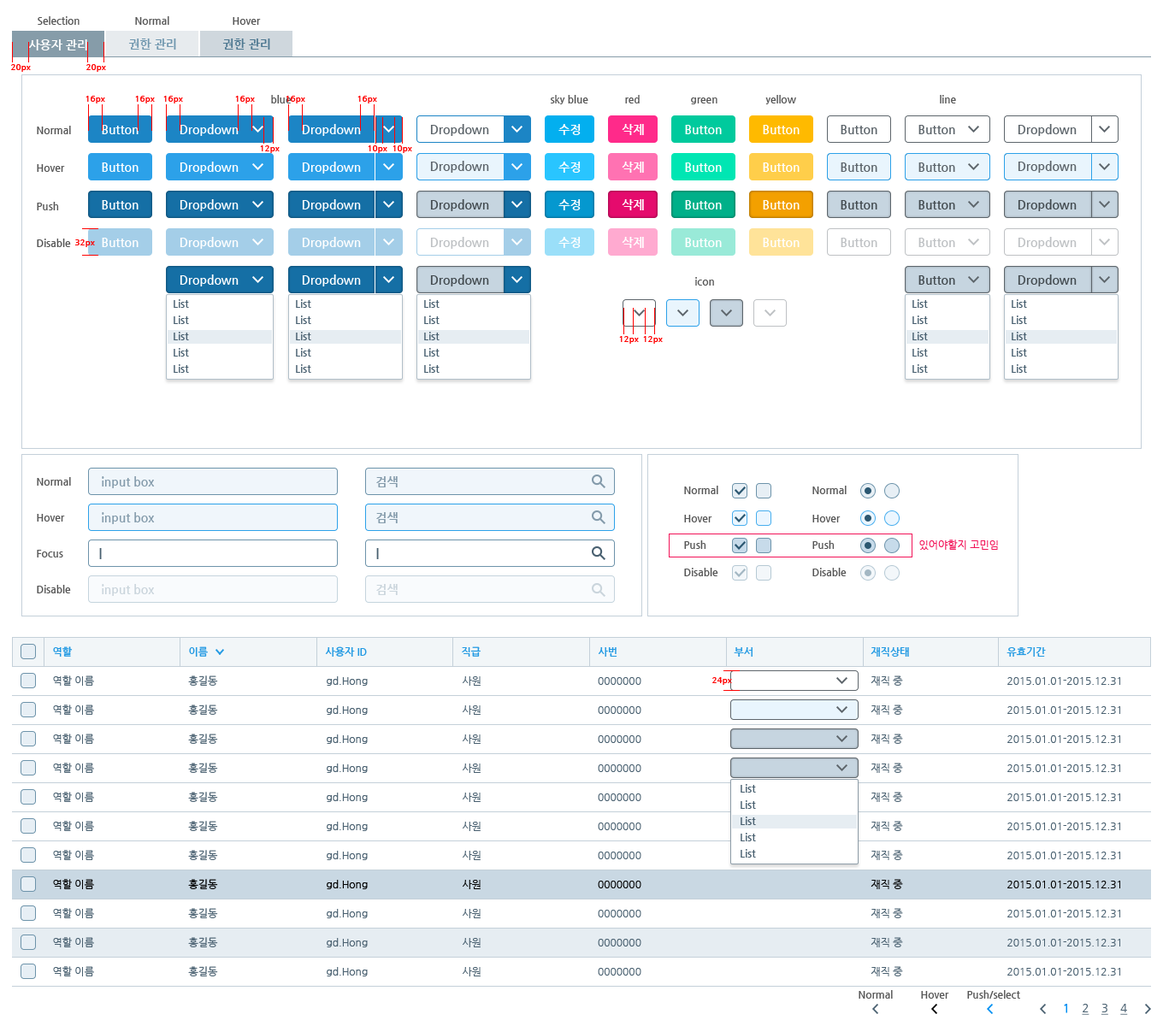
<style>
.page{position:relative;width:1163px;height:1026px;background:#ffffff}
.page>*{position:absolute;margin:0}
.t1{font:10.3px "NanumGothicBold";color:#565656}
.t2{font:12px "NanumGothicBold";color:#ffffff}
.t3{font:12px "NanumGothicBold";color:#7097af}
.t4{font:12px "NanumGothicBold";color:#4e7891}
.t5{font:8.5px "NanumGothicBold";color:#ff0000}
.t6{font:12px "NanumGothicBold";color:#5d656b}
.t7{font:12px "NanumGothicBold";color:#434b50}
.t8{font:12px "NanumGothicBold";color:#bec1c4}
.t9{font:10.3px/16.2px "NanumGothicBold";color:#496070}
.t10{font:12px "NanumGothicBold";color:#849bab}
.t11{font:10.3px "NanumGothic";color:#f21257}
.t12{font:12px "NanumGothicBold";color:#496070}
.t13{font:12px "NanumGothicBold";color:#cad5dc}
.t14{font:10.3px "NanumGothicBold";color:#239ae3}
.t15{font:10.3px/29.1px "NanumGothic";color:#496070}
.t16{font:10.3px/29.1px "NanumGothic";color:#010101}
.t17{font:10.3px/29.1px "NanumGothic";color:#000000}
.t18{font:11.1px "NanumGothic";color:#496070;text-decoration:underline}
.t19{font:11.1px "NanumGothic";color:#008ff2;font-weight:bold}
</style>
<div class="page">
<p class="t1" style="left:38px;top:16px;width:41px;height:9px">Selection</p>
<p class="t1" style="left:135px;top:16px;width:34px;height:9px">Normal</p>
<p class="t1" style="left:233px;top:17px;width:28px;height:8px">Hover</p>
<p class="t2" style="left:28px;top:39px;width:59px;height:11px">사용자 관리</p>
<p class="t3" style="left:128px;top:38px;width:48px;height:12px">권한 관리</p>
<p class="t4" style="left:222px;top:38px;width:48px;height:12px">권한 관리</p>
<p class="t5" style="left:10px;top:64px;width:21px;height:8px">20px</p>
<p class="t5" style="left:85px;top:64px;width:21px;height:8px">20px</p>
<p class="t5" style="left:85px;top:96px;width:20px;height:7px">16px</p>
<p class="t5" style="left:135px;top:96px;width:20px;height:7px">16px</p>
<p class="t5" style="left:163px;top:96px;width:20px;height:7px">16px</p>
<p class="t5" style="left:235px;top:96px;width:20px;height:7px">16px</p>
<p class="t1" style="left:271px;top:95px;width:20px;height:8px">blue</p>
<p class="t5" style="left:285px;top:96px;width:20px;height:7px">16px</p>
<p class="t5" style="left:357px;top:96px;width:20px;height:7px">16px</p>
<p class="t1" style="left:550px;top:95px;width:38px;height:9px">sky blue</p>
<p class="t1" style="left:625px;top:95px;width:14px;height:8px">red</p>
<p class="t1" style="left:691px;top:97px;width:26px;height:7px">green</p>
<p class="t1" style="left:765px;top:95px;width:31px;height:9px">yellow</p>
<p class="t1" style="left:939px;top:95px;width:17px;height:8px">line</p>
<p class="t1" style="left:37px;top:126px;width:34px;height:8px">Normal</p>
<p class="t2" style="left:102px;top:125px;width:36px;height:9px">Button</p>
<p class="t2" style="left:180px;top:124px;width:58px;height:12px">Dropdown</p>
<p class="t2" style="left:302px;top:124px;width:59px;height:12px">Dropdown</p>
<p class="t6" style="left:430px;top:124px;width:59px;height:12px">Dropdown</p>
<p class="t2" style="left:558px;top:124px;width:22px;height:11px">수정</p>
<p class="t2" style="left:621px;top:124px;width:23px;height:11px">삭제</p>
<p class="t2" style="left:685px;top:125px;width:36px;height:9px">Button</p>
<p class="t2" style="left:762px;top:125px;width:37px;height:9px">Button</p>
<p class="t6" style="left:840px;top:125px;width:37px;height:9px">Button</p>
<p class="t6" style="left:918px;top:125px;width:37px;height:9px">Button</p>
<p class="t6" style="left:1017px;top:124px;width:59px;height:12px">Dropdown</p>
<p class="t5" style="left:260px;top:145px;width:20px;height:8px">12px</p>
<p class="t5" style="left:368px;top:145px;width:19px;height:8px">10px</p>
<p class="t5" style="left:392px;top:145px;width:20px;height:8px">10px</p>
<p class="t2" style="left:180px;top:162px;width:58px;height:12px">Dropdown</p>
<p class="t2" style="left:302px;top:162px;width:59px;height:12px">Dropdown</p>
<p class="t6" style="left:430px;top:161px;width:59px;height:12px">Dropdown</p>
<p class="t2" style="left:558px;top:162px;width:22px;height:11px">수정</p>
<p class="t2" style="left:621px;top:162px;width:23px;height:11px">삭제</p>
<p class="t6" style="left:1017px;top:161px;width:59px;height:12px">Dropdown</p>
<p class="t1" style="left:37px;top:164px;width:28px;height:8px">Hover</p>
<p class="t2" style="left:102px;top:162px;width:36px;height:10px">Button</p>
<p class="t2" style="left:685px;top:162px;width:36px;height:10px">Button</p>
<p class="t2" style="left:762px;top:162px;width:37px;height:10px">Button</p>
<p class="t6" style="left:840px;top:162px;width:37px;height:10px">Button</p>
<p class="t6" style="left:918px;top:162px;width:37px;height:10px">Button</p>
<p class="t1" style="left:37px;top:202px;width:22px;height:8px">Push</p>
<p class="t2" style="left:102px;top:200px;width:36px;height:9px">Button</p>
<p class="t2" style="left:180px;top:199px;width:58px;height:12px">Dropdown</p>
<p class="t2" style="left:302px;top:199px;width:59px;height:12px">Dropdown</p>
<p class="t7" style="left:430px;top:199px;width:59px;height:12px">Dropdown</p>
<p class="t2" style="left:558px;top:199px;width:22px;height:11px">수정</p>
<p class="t2" style="left:621px;top:199px;width:23px;height:11px">삭제</p>
<p class="t2" style="left:685px;top:200px;width:36px;height:9px">Button</p>
<p class="t2" style="left:762px;top:200px;width:37px;height:9px">Button</p>
<p class="t7" style="left:840px;top:200px;width:37px;height:9px">Button</p>
<p class="t7" style="left:918px;top:200px;width:37px;height:9px">Button</p>
<p class="t7" style="left:1017px;top:199px;width:59px;height:12px">Dropdown</p>
<p class="t1" style="left:37px;top:238px;width:34px;height:9px">Disable</p>
<p class="t5" style="left:75px;top:239px;width:20px;height:8px">32px</p>
<p class="t2" style="left:102px;top:238px;width:36px;height:9px">Button</p>
<p class="t2" style="left:180px;top:237px;width:58px;height:12px">Dropdown</p>
<p class="t2" style="left:302px;top:237px;width:59px;height:12px">Dropdown</p>
<p class="t8" style="left:430px;top:237px;width:59px;height:12px">Dropdown</p>
<p class="t2" style="left:558px;top:237px;width:22px;height:11px">수정</p>
<p class="t2" style="left:621px;top:237px;width:23px;height:11px">삭제</p>
<p class="t2" style="left:685px;top:238px;width:36px;height:9px">Button</p>
<p class="t2" style="left:762px;top:238px;width:37px;height:9px">Button</p>
<p class="t8" style="left:840px;top:238px;width:37px;height:9px">Button</p>
<p class="t8" style="left:918px;top:238px;width:37px;height:9px">Button</p>
<p class="t8" style="left:1017px;top:237px;width:59px;height:12px">Dropdown</p>
<p class="t2" style="left:180px;top:274px;width:58px;height:12px">Dropdown</p>
<p class="t2" style="left:302px;top:274px;width:59px;height:12px">Dropdown</p>
<p class="t7" style="left:430px;top:274px;width:59px;height:12px">Dropdown</p>
<p class="t1" style="left:695px;top:277px;width:19px;height:8px">icon</p>
<p class="t7" style="left:918px;top:275px;width:37px;height:10px">Button</p>
<p class="t7" style="left:1017px;top:274px;width:59px;height:12px">Dropdown</p>
<p class="t9" style="left:174px;top:299px;width:15px;height:74px;text-align:center">List<br>List<br>List<br>List<br>List</p>
<p class="t9" style="left:296px;top:299px;width:15px;height:74px;text-align:center">List<br>List<br>List<br>List<br>List</p>
<p class="t9" style="left:424px;top:299px;width:15px;height:74px;text-align:center">List<br>List<br>List<br>List<br>List</p>
<p class="t9" style="left:912px;top:299px;width:15px;height:74px;text-align:center">List<br>List<br>List<br>List<br>List</p>
<p class="t9" style="left:1011px;top:299px;width:16px;height:74px;text-align:center">List<br>List<br>List<br>List<br>List</p>
<p class="t5" style="left:619px;top:336px;width:20px;height:8px">12px</p>
<p class="t5" style="left:643px;top:336px;width:19px;height:8px">12px</p>
<p class="t1" style="left:37px;top:477px;width:34px;height:9px">Normal</p>
<p class="t10" style="left:102px;top:476px;width:53px;height:12px">input box</p>
<p class="t10" style="left:376px;top:476px;width:21px;height:11px">검색</p>
<p class="t1" style="left:684px;top:486px;width:34px;height:8px">Normal</p>
<p class="t1" style="left:812px;top:486px;width:34px;height:8px">Normal</p>
<p class="t1" style="left:37px;top:514px;width:28px;height:7px">Hover</p>
<p class="t10" style="left:102px;top:512px;width:53px;height:12px">input box</p>
<p class="t10" style="left:376px;top:512px;width:21px;height:11px">검색</p>
<p class="t1" style="left:684px;top:515px;width:28px;height:7px">Hover</p>
<p class="t1" style="left:812px;top:515px;width:28px;height:7px">Hover</p>
<p class="t1" style="left:684px;top:540px;width:22px;height:9px">Push</p>
<p class="t1" style="left:812px;top:540px;width:22px;height:9px">Push</p>
<p class="t11" style="left:919px;top:539px;width:79px;height:11px">있어야할지 고민임</p>
<p class="t1" style="left:37px;top:550px;width:26px;height:7px">Focus</p>
<p class="t12" style="left:99px;top:548px;width:3px;height:11px">|</p>
<p class="t12" style="left:376px;top:548px;width:3px;height:11px">|</p>
<p class="t1" style="left:684px;top:568px;width:34px;height:8px">Disable</p>
<p class="t1" style="left:812px;top:568px;width:34px;height:8px">Disable</p>
<p class="t1" style="left:37px;top:585px;width:34px;height:8px">Disable</p>
<p class="t13" style="left:102px;top:584px;width:53px;height:12px">input box</p>
<p class="t13" style="left:376px;top:584px;width:21px;height:11px">검색</p>
<p class="t14" style="left:53px;top:646px;width:20px;height:10px">역할</p>
<p class="t14" style="left:189px;top:646px;width:19px;height:10px">이름</p>
<p class="t14" style="left:325px;top:646px;width:42px;height:10px">사용자 ID</p>
<p class="t14" style="left:462px;top:646px;width:18px;height:10px">직급</p>
<p class="t14" style="left:597px;top:647px;width:20px;height:9px">사번</p>
<p class="t14" style="left:733px;top:647px;width:19px;height:9px">부서</p>
<p class="t14" style="left:870px;top:647px;width:39px;height:9px">재직상태</p>
<p class="t14" style="left:1006px;top:647px;width:39px;height:9px">유효기간</p>
<p class="t15" style="left:53px;top:675px;width:41px;height:301px">역할 이름<br>역할 이름<br>역할 이름<br>역할 이름<br>역할 이름<br>역할 이름<br>역할 이름<br><span class="t16">역할 이름<br></span>역할 이름<br>역할 이름<br>역할 이름</p>
<p class="t15" style="left:188px;top:675px;width:30px;height:301px">홍길동<br>홍길동<br>홍길동<br>홍길동<br>홍길동<br>홍길동<br>홍길동<br><span class="t17">홍길동<br></span>홍길동<br>홍길동<br>홍길동</p>
<p class="t15" style="left:327px;top:676px;width:41px;height:300px">gd.Hong<br>gd.Hong<br>gd.Hong<br>gd.Hong<br>gd.Hong<br>gd.Hong<br>gd.Hong<br><span class="t17">gd.Hong<br></span>gd.Hong<br>gd.Hong<br>gd.Hong</p>
<p class="t15" style="left:462px;top:676px;width:18px;height:300px">사원<br>사원<br>사원<br>사원<br>사원<br>사원<br>사원<br><span class="t17">사원<br></span>사원<br>사원<br>사원</p>
<p class="t15" style="left:597px;top:677px;width:44px;height:298px;text-align:center">0000000<br>0000000<br>0000000<br>0000000<br>0000000<br>0000000<br>0000000<br><span class="t17">0000000<br></span>0000000<br>0000000<br>0000000</p>
<p class="t5" style="left:711px;top:677px;width:21px;height:8px">24px</p>
<p class="t15" style="left:870px;top:675px;width:33px;height:301px">재직 중<br>재직 중<br>재직 중<br>재직 중<br>재직 중<br>재직 중<br>재직 중<br><span class="t17">재직 중<br></span>재직 중<br>재직 중<br>재직 중</p>
<p class="t15" style="left:1007px;top:677px;width:113px;height:298px">2015.01.01-2015.12.31<br>2015.01.01-2015.12.31<br>2015.01.01-2015.12.31<br>2015.01.01-2015.12.31<br>2015.01.01-2015.12.31<br>2015.01.01-2015.12.31<br>2015.01.01-2015.12.31<br><span class="t17">2015.01.01-2015.12.31<br></span>2015.01.01-2015.12.31<br>2015.01.01-2015.12.31<br>2015.01.01-2015.12.31</p>
<p class="t9" style="left:740px;top:784px;width:16px;height:73px;text-align:center">List<br>List<br>List<br>List<br>List</p>
<p class="t1" style="left:858px;top:990px;width:34px;height:8px">Normal</p>
<p class="t1" style="left:967px;top:990px;width:53px;height:8px">Push/select</p>
<p class="t1" style="left:921px;top:991px;width:28px;height:7px">Hover</p>
<p class="t18" style="left:1063px;top:1004px;width:64px;height:11px"><span class="t19">1    </span>2    3    4</p>
</div>
